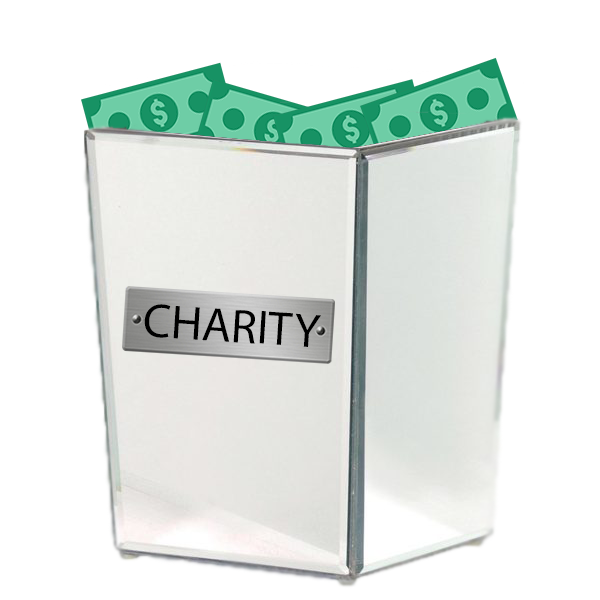
<style>
.page{position:relative;width:600px;height:600px;background:#ffffff}
.page>*{position:absolute;margin:0}
.t1{font:48px "MyriadPro-Regular";color:#000000}
</style>
<div class="page">
<p class="t1" style="left:144px;top:304px;width:177px;height:43px;rotate:4deg">CHARITY</p>
</div>
